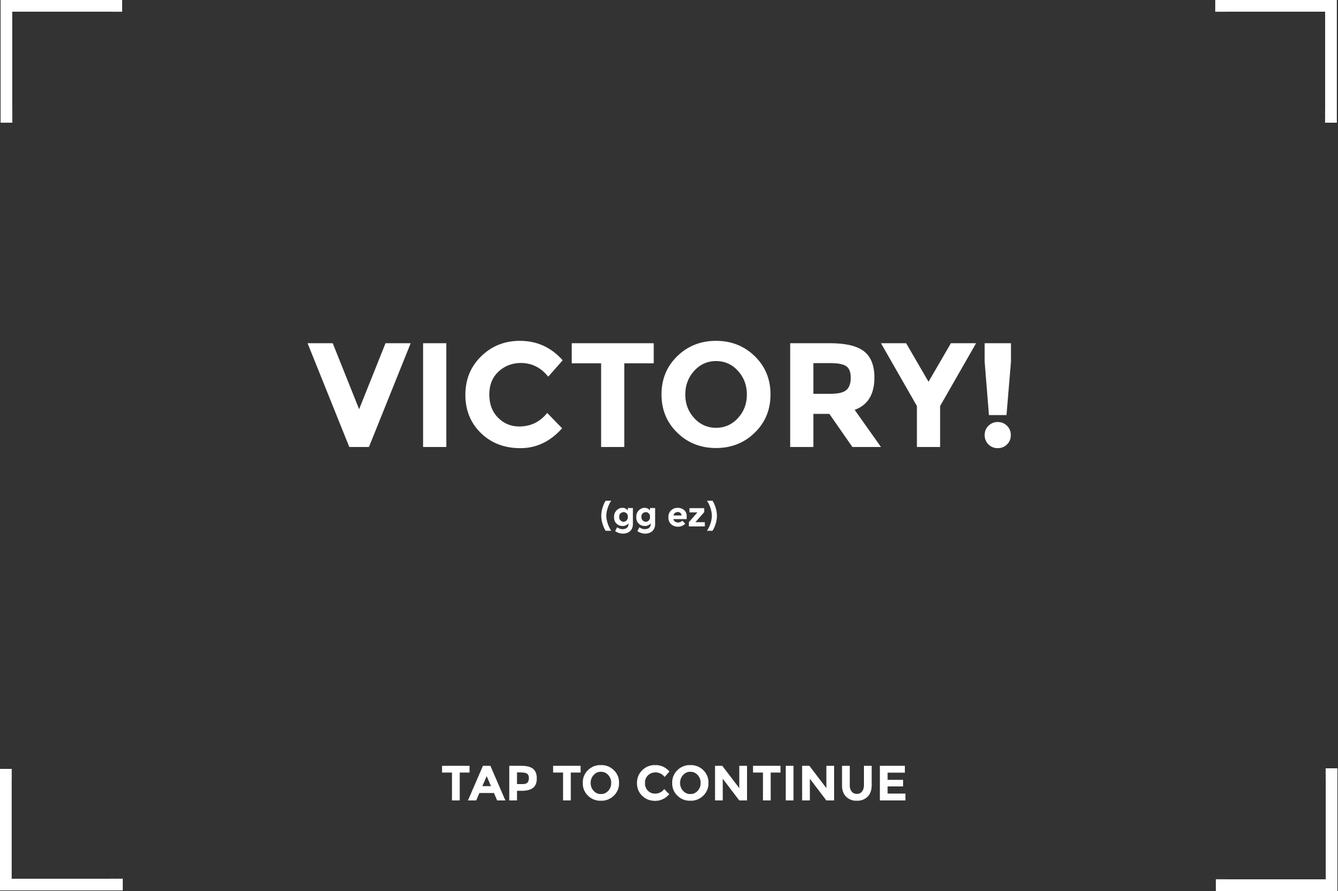
<style>
.page{position:relative;width:1338px;height:891px;background:#333333}
.page>*{position:absolute;margin:0}
.t1{font:148.5px "Montserrat-Bold";color:#ffffff}
.t2{font:34px "Montserrat-Bold";color:#ffffff}
.t3{font:49.5px "Montserrat-Bold";color:#ffffff}
</style>
<div class="page">
<p class="t1" style="left:307px;top:341px;width:704px;height:108px">VICTORY!</p>
<p class="t2" style="left:601px;top:501px;width:116px;height:33px">(gg ez)</p>
<p class="t3" style="left:442px;top:765px;width:463px;height:36px">TAP TO CONTINUE</p>
</div>
